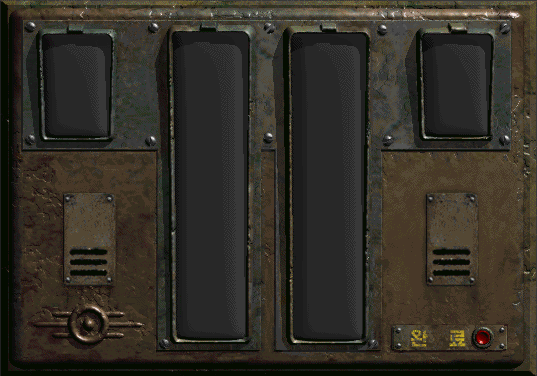
<style>
.page{position:relative;width:537px;height:376px}
.page>*{position:absolute;margin:0}
.t1{font:18.5px "HakgyoansimPosterB"}
</style>
<div class="page">
<p class="t1" style="left:411px;top:329px;width:55px;height:18px">완     료</p>
</div>
